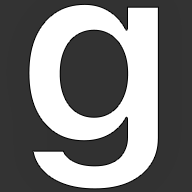
<style>
.page{position:relative;width:192px;height:192px;background:#323232}
.page>*{position:absolute;margin:0}
.t1{font:261.4px "SFPro-Semibold";color:#ffffff}
</style>
<div class="page">
<p class="t1" style="left:28px;top:3px;width:131px;height:187px">g</p>
</div>
